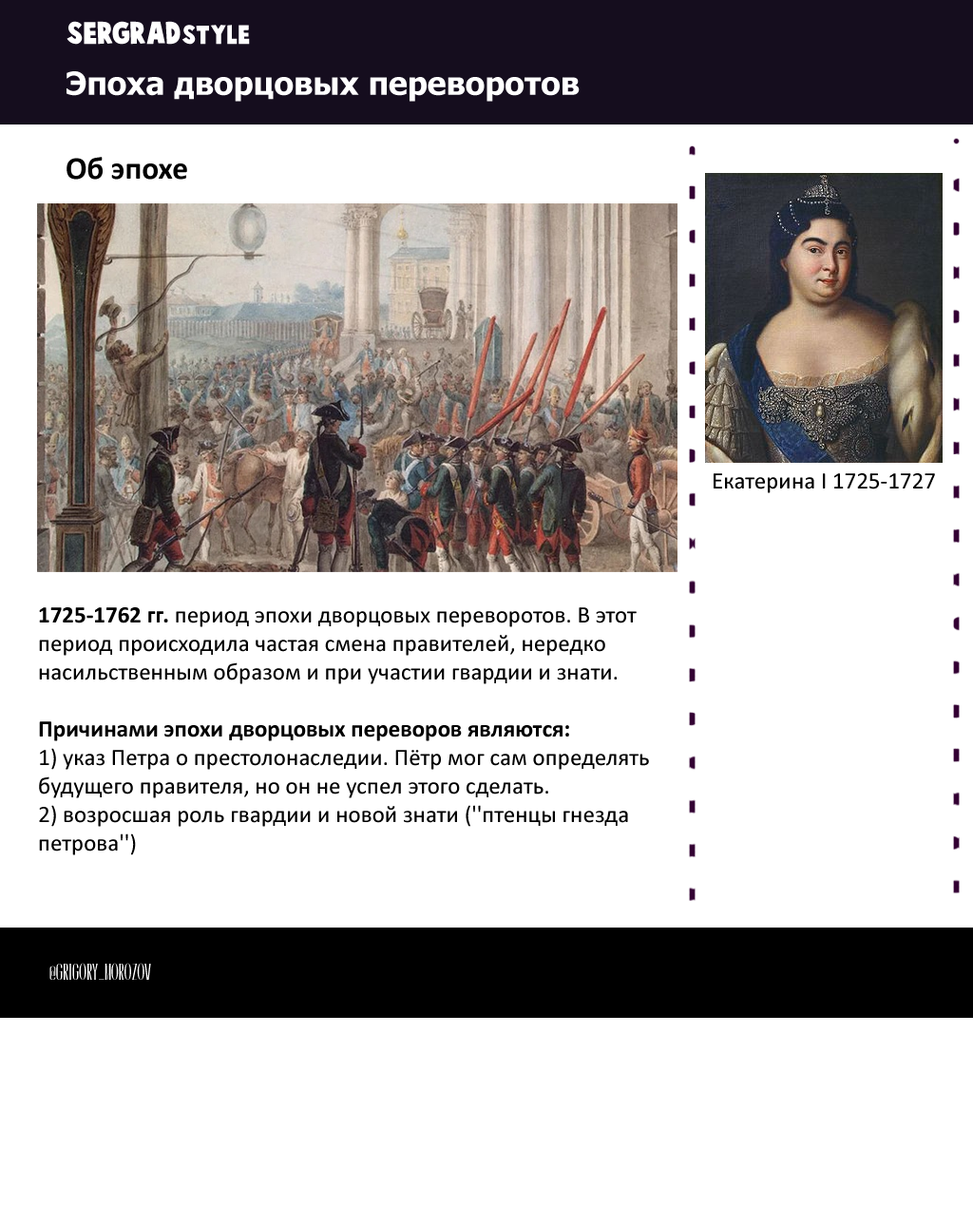
<style>
.page{position:relative;width:973px;height:1225px;background:#ffffff}
.page>*{position:absolute;margin:0}
.t1{font:27.7px "CartoonistKooky";color:#ffffff}
.t2{font:23.8px "CartoonistKooky";color:#ffffff}
.t3{font:31.7px "Caledo-Bold";color:#ffffff}
.t4{font:31.7px "Calibri-Bold";color:#000000}
.t5{font:23.8px "Calibri";color:#000000}
.t6{font:23.8px "Calibri-Bold";color:#000000}
.t7{font:17.8px "Caledo-Bold";color:#ffffff}
</style>
<div class="page">
<p class="t1" style="left:67px;top:21px;width:183px;height:24px">SERGRAD<span class="t2">style</span></p>
<p class="t3" style="left:67px;top:71px;width:513px;height:31px">Эпоха дворцовых переворотов</p>
<p class="t4" style="left:67px;top:157px;width:120px;height:23px">Об эпохе</p>
<p class="t5" style="left:714px;top:473px;width:221px;height:20px">Екатерина I 1725-1727</p>
<p class="t5" style="left:39px;top:607px;width:610px;height:248px"><span class="t6">1725-1762 гг. </span>период эпохи дворцовых переворотов. В этот период происходила частая смена правителей, нередко насильственным образом и при участии гвардии и знати.<br><br><span class="t6">Причинами эпохи дворцовых переворов являются:<br></span>1) указ Петра о престолонаследии. Пётр мог сам определять будущего правителя, но он не успел этого сделать. <br>2) возросшая роль гвардии и новой знати (''птенцы гнезда петрова'')</p>
<p class="t7" style="left:49px;top:963px;width:102px;height:17px">@Grigory_Morozov</p>
</div>
